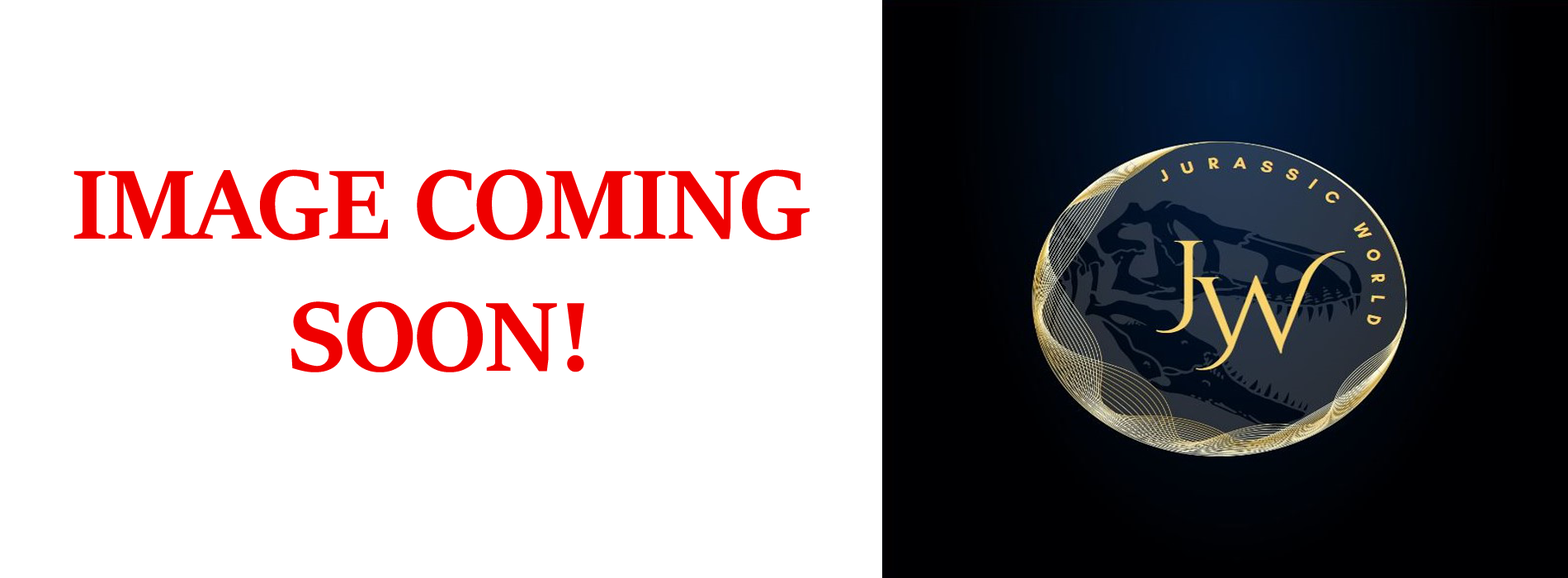
<style>
.page{position:relative;width:1568px;height:578px;background:#ffffff}
.page>*{position:absolute;margin:0}
.t1{font:110px "SitkaBanner-Bold";color:#ef0000}
</style>
<div class="page">
<p class="t1" style="left:73px;top:169px;width:737px;height:203px;text-align:center">IMAGE COMING SOON!</p>
</div>
